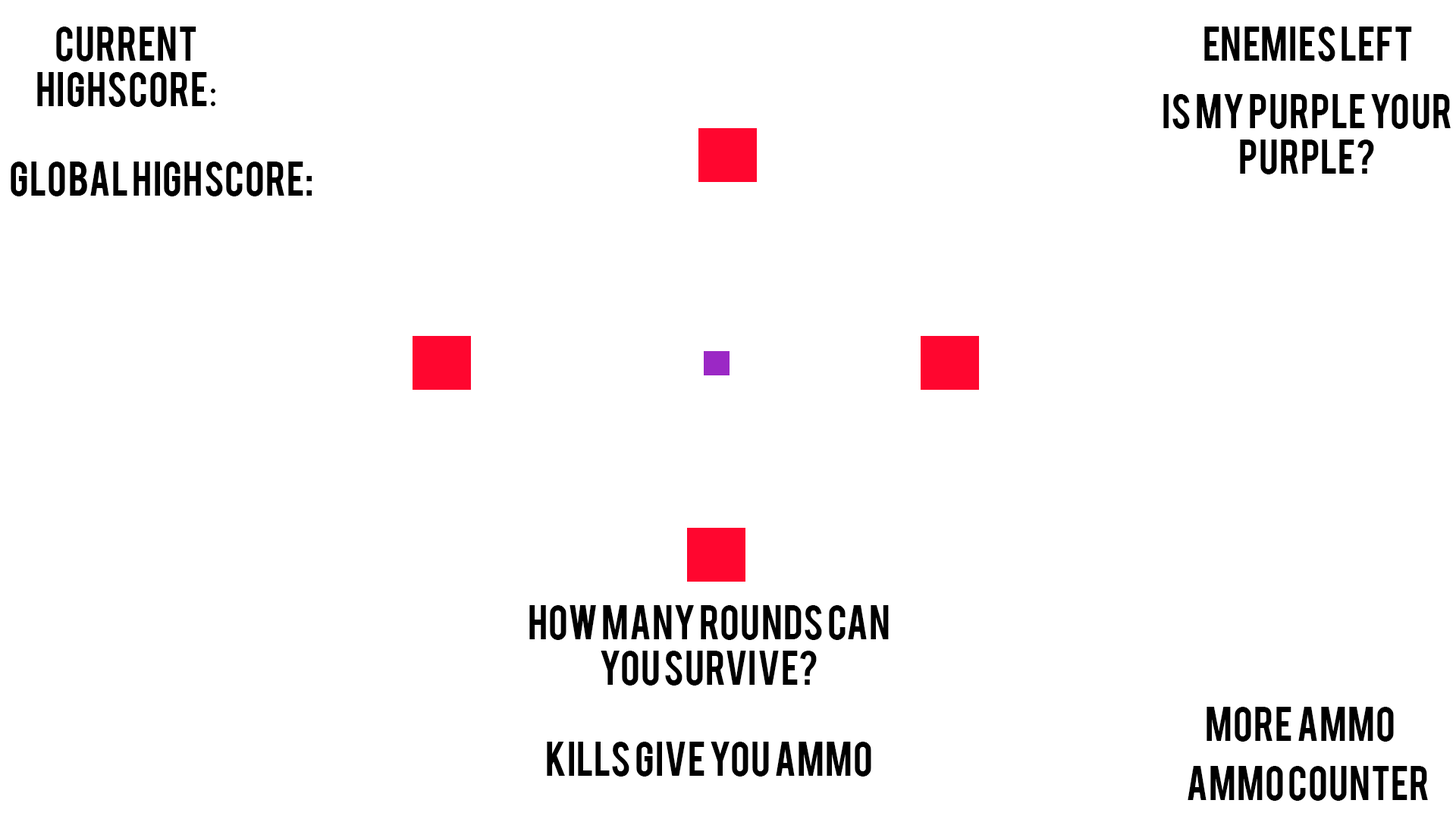
<style>
.page{position:relative;width:1456px;height:819px;background:#ffffff}
.page>*{position:absolute;margin:0}
.t1{font:37.9px "Bebas";color:#000000}
.t2{font:37.9px "MyriadPro-Regular";color:#000000}
</style>
<div class="page">
<p class="t1" style="left:37px;top:27px;width:178px;height:80px;text-align:center">CURRENT HIGHSCORE<span class="t2">:</span></p>
<p class="t1" style="left:1204px;top:27px;width:208px;height:34px">ENEMIES LEFT</p>
<p class="t1" style="left:1163px;top:94px;width:288px;height:80px;text-align:center">is my purple your purple?</p>
<p class="t1" style="left:11px;top:162px;width:301px;height:34px">GLOBAL HIGHSCORE:</p>
<p class="t1" style="left:529px;top:605px;width:360px;height:172px;text-align:center">how many rounds can you survive?<br><br>Kills give you ammo</p>
<p class="t1" style="left:1206px;top:707px;width:188px;height:35px">more ammo</p>
<p class="t1" style="left:1188px;top:766px;width:240px;height:35px">aMMO COUNTER</p>
</div>
